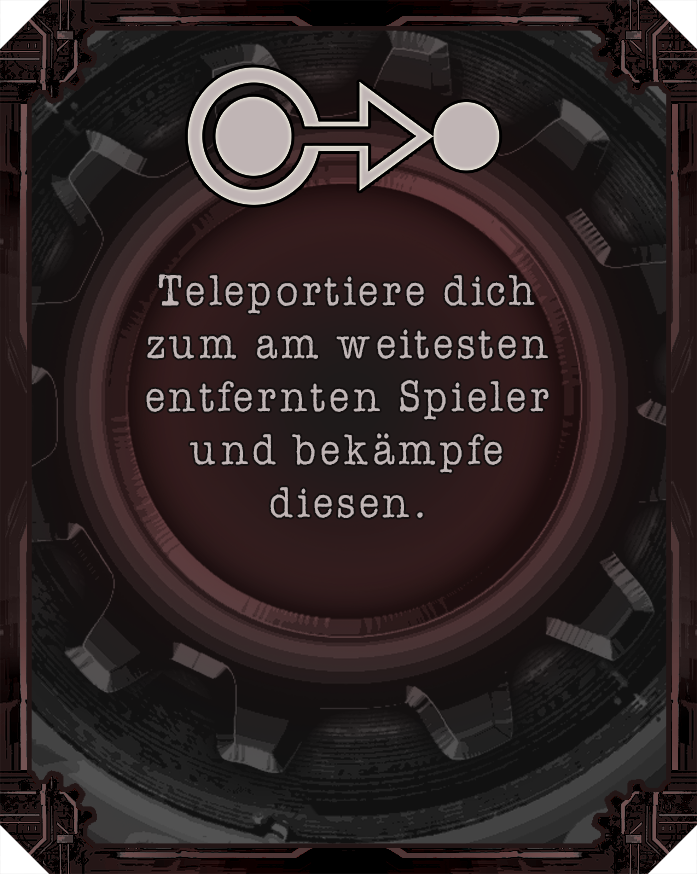
<style>
.page{position:relative;width:697px;height:874px}
.page>*{position:absolute;margin:0}
.t1{font:44.2px "AmerTypewriterITCbyBT-Medium";letter-spacing:0.02em;color:#c0b5b5}
</style>
<div class="page">
<p class="t1" style="left:146px;top:274px;width:403px;height:244px;text-align:center">Teleportiere dich zum am weitesten entfernten Spieler und bekämpfe diesen.</p>
</div>
